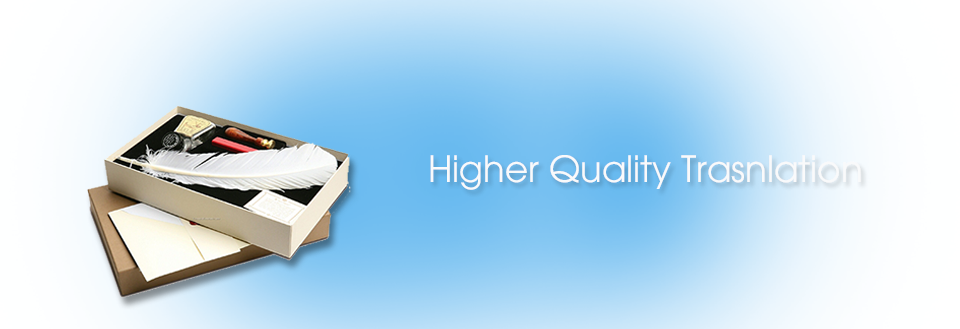
<style>
.page{position:relative;width:960px;height:329px}
.page>*{position:absolute;margin:0}
.t1{font:36px "UTM-Avo";color:#f9fafb}
</style>
<div class="page">
<p class="t1" style="left:430px;top:155px;width:431px;height:35px">Higher Quality Trasnlation</p>
</div>
